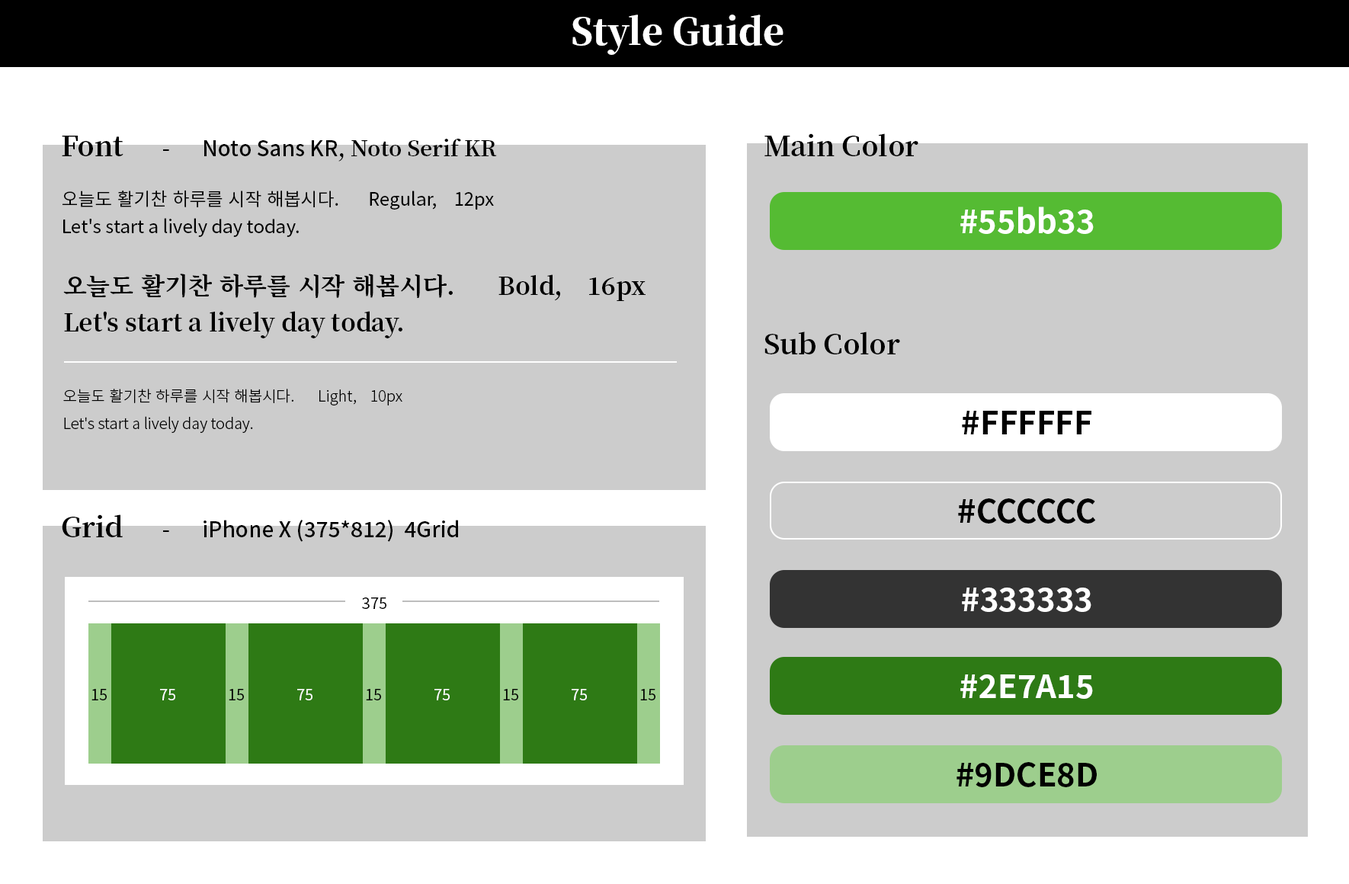
<style>
.page{position:relative;width:1349px;height:884px;background:#cccccc}
.page>*{position:absolute;margin:0}
.t1{font:36.6px "NotoSerifKR-Black";color:#ffffff}
.t2{font:27.4px "NotoSerifKR-Bold";color:#000000}
.t3{font:21.3px "NotoSerifKR-Bold";color:#000000}
.t4{font:21.3px "NotoSansKR-Medium";color:#000000}
.t5{font:18.3px/27.4px "NotoSansKR-Regular";color:#000000}
.t6{font:32px "NotoSansKR-Bold";color:#ffffff}
.t7{font:24.4px/36.6px "NotoSerifKR-Bold";color:#000000}
.t8{font:15.2px/27.4px "NotoSansKR-Light";color:#000000}
.t9{font:32px "NotoSansKR-Bold";color:#000000}
.t10{font:15.2px "NotoSansKR-Regular";color:#000000}
.t11{font:15.2px "NotoSansKR-Regular";color:#ffffff}
</style>
<div class="page">
<p class="t1" style="left:572px;top:14px;width:211px;height:41px">Style Guide</p>
<p class="t2" style="left:62px;top:136px;width:61px;height:20px">Font</p>
<p class="t2" style="left:764px;top:133px;width:154px;height:23px">Main Color</p>
<p class="t3" style="left:163px;top:139px;width:334px;height:23px">-      <span class="t4">Noto Sans KR</span>, Noto Serif KR</p>
<p class="t5" style="left:62px;top:191px;width:432px;height:46px">오늘도 활기찬 하루를 시작 해봅시다.       Regular,    12px<br>Let's start a lively day today.</p>
<p class="t6" style="left:960px;top:207px;width:134px;height:27px">#55bb33</p>
<p class="t7" style="left:63px;top:274px;width:582px;height:64px">오늘도 활기찬 하루를 시작 해봅시다.       Bold,    16px<br>Let's start a lively day today.</p>
<p class="t2" style="left:764px;top:332px;width:136px;height:22px">Sub Color</p>
<p class="t8" style="left:63px;top:389px;width:339px;height:44px">오늘도 활기찬 하루를 시작 해봅시다.       Light,    10px<br>Let's start a lively day today.</p>
<p class="t9" style="left:962px;top:411px;width:129px;height:23px">#FFFFFF</p>
<p class="t9" style="left:958px;top:498px;width:138px;height:26px">#CCCCCC</p>
<p class="t2" style="left:62px;top:514px;width:61px;height:23px">Grid</p>
<p class="t4" style="left:163px;top:520px;width:295px;height:22px"><span class="t3">-      </span>iPhone X (375*812)  4Grid</p>
<p class="t6" style="left:962px;top:588px;width:129px;height:24px">#333333</p>
<p class="t10" style="left:362px;top:597px;width:24px;height:12px">375</p>
<p class="t6" style="left:960px;top:674px;width:133px;height:25px">#2E7A15</p>
<p class="t10" style="left:91px;top:689px;width:16px;height:11px">15</p>
<p class="t11" style="left:160px;top:689px;width:15px;height:11px">75</p>
<p class="t10" style="left:229px;top:689px;width:15px;height:11px">15</p>
<p class="t11" style="left:297px;top:689px;width:15px;height:11px">75</p>
<p class="t10" style="left:366px;top:689px;width:15px;height:11px">15</p>
<p class="t11" style="left:434px;top:689px;width:16px;height:11px">75</p>
<p class="t10" style="left:503px;top:689px;width:15px;height:11px">15</p>
<p class="t11" style="left:572px;top:689px;width:15px;height:11px">75</p>
<p class="t10" style="left:640px;top:689px;width:15px;height:11px">15</p>
<p class="t9" style="left:956px;top:762px;width:141px;height:25px">#9DCE8D</p>
</div>
